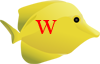
<style>
.page{position:relative;width:100px;height:64px;background:#ffffff}
.page>*{position:absolute;margin:0}
.t1{font:30px "TimesNewRomanPSMT";color:#ff0000}
</style>
<div class="page">
<p class="t1" style="left:35px;top:20px;width:22px;height:14px">w</p>
</div>
